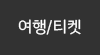
<style>
.page{position:relative;width:100px;height:55px;background:#323232}
.page>*{position:absolute;margin:0}
.t1{font:16px "IBMPlexSansKR";color:#ffffff}
</style>
<div class="page">
<p class="t1" style="left:18px;top:19px;width:63px;height:16px">여행/티켓</p>
</div>
